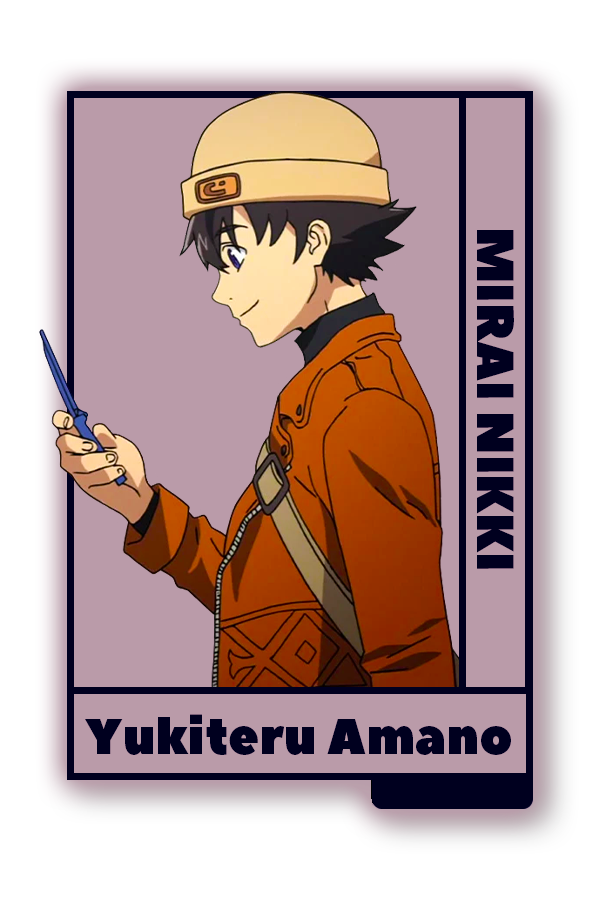
<style>
.page{position:relative;width:600px;height:900px;background:#ba9ba9}
.page>*{position:absolute;margin:0}
.t1{font:52px "PeaceSans";color:#00001b}
.t2{font:50.5px "PeaceSans";color:#00001b}
</style>
<div class="page">
<p class="t1" style="left:477px;top:230px;width:37px;height:339px;rotate:90deg">MIRAI NIKKI</p>
<p class="t2" style="left:85px;top:714px;width:426px;height:41px">Yukiteru Amano</p>
</div>
